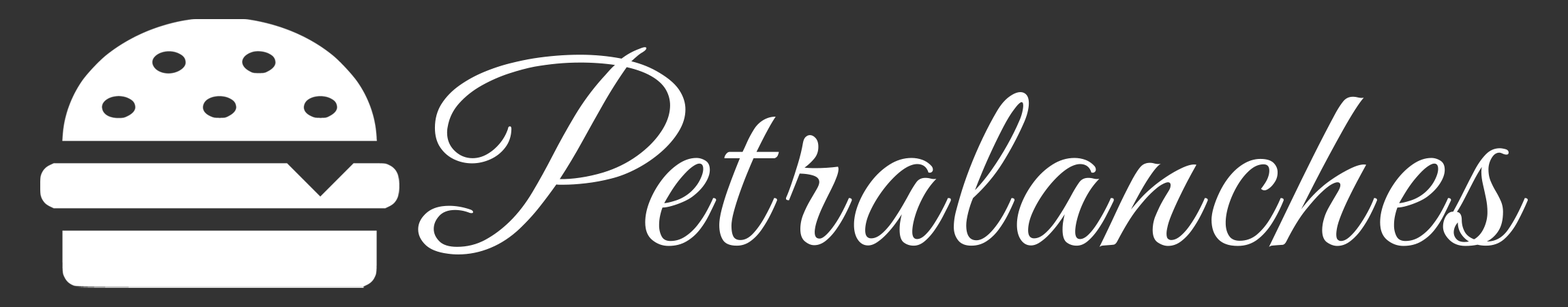
<style>
.page{position:relative;width:1568px;height:307px;background:#333333}
.page>*{position:absolute;margin:0}
.t1{font:242.4px "GreatVibes-Regular";letter-spacing:0.05em;color:#ffffff}
</style>
<div class="page">
<p class="t1" style="left:418px;top:47px;width:1110px;height:207px">Petralanches</p>
</div>
